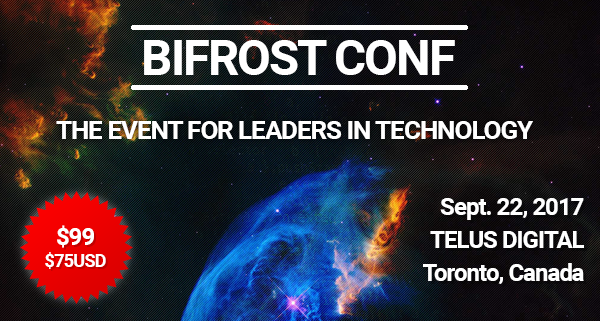
<style>
.page{position:relative;width:600px;height:321px}
.page>*{position:absolute;margin:0}
.t1{font:49px "Roboto-Bold";letter-spacing:-0.04em;color:#ffffff}
.t2{font:26px "Roboto-Bold";letter-spacing:-0.04em;color:#ffffff}
.t3{font:24px/33px "Roboto-Bold";letter-spacing:-0.04em;color:#ffffff}
.t4{font:18px/22px "Roboto-Bold";letter-spacing:-0.04em;color:#ffffff}
.t5{font:24px/34px "Roboto-Bold";letter-spacing:-0.04em;color:#ffffff}
</style>
<div class="page">
<p class="t1" style="left:144px;top:40px;width:311px;height:35px">BIFROST CONF</p>
<p class="t2" style="left:56px;top:121px;width:477px;height:18px">THE EVENT FOR LEADERS IN TECHNOLOGY</p>
<p class="t3" style="left:423px;top:198px;width:161px;height:86px;text-align:right">Sept. 22, 2017<br>TELUS DIGITAL<br>Toronto, Canada</p>
<p class="t4" style="left:45px;top:225px;width:61px;height:44px;text-align:center"><span class="t5">$99<br></span>$75USD</p>
</div>
